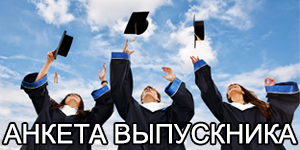
<style>
.page{position:relative;width:300px;height:150px}
.page>*{position:absolute;margin:0}
.t1{font:26.4px "ArialMT";color:#fefefe}
</style>
<div class="page">
<p class="t1" style="left:3px;top:123px;width:294px;height:21px">АНКЕТА ВЫПУСКНИКА</p>
</div>
